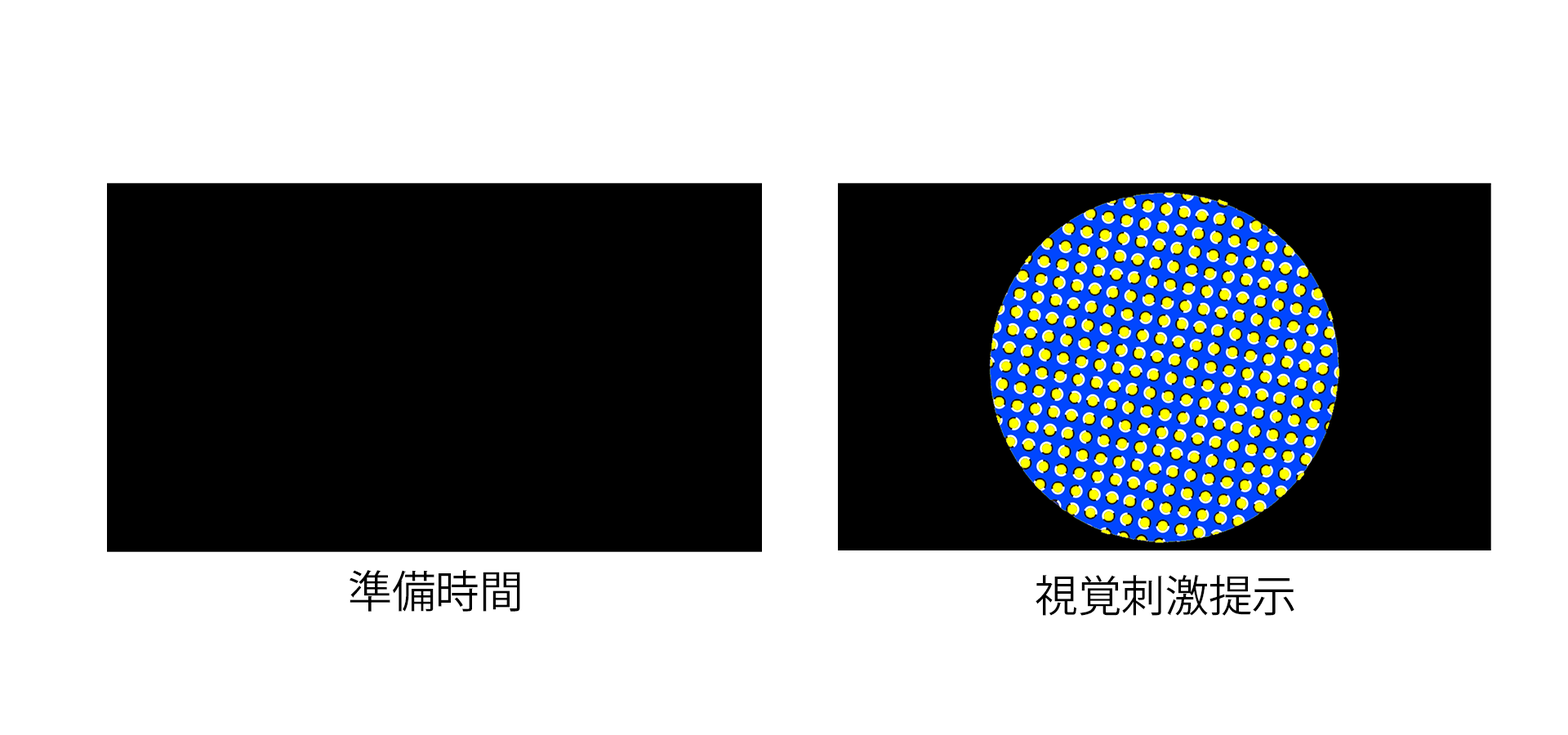
<style>
.page{position:relative;width:1568px;height:735px;background:#ffffff}
.page>*{position:absolute;margin:0}
.t1{font:44.2px "KozGoPr6N-Regular";color:#000000}
.t2{font:43.5px "KozGoPr6N-Regular";color:#000000}
</style>
<div class="page">
<p class="t1" style="left:350px;top:570px;width:170px;height:42px">準備時間</p>
<p class="t2" style="left:1036px;top:574px;width:258px;height:42px">視覚刺激提示</p>
</div>
